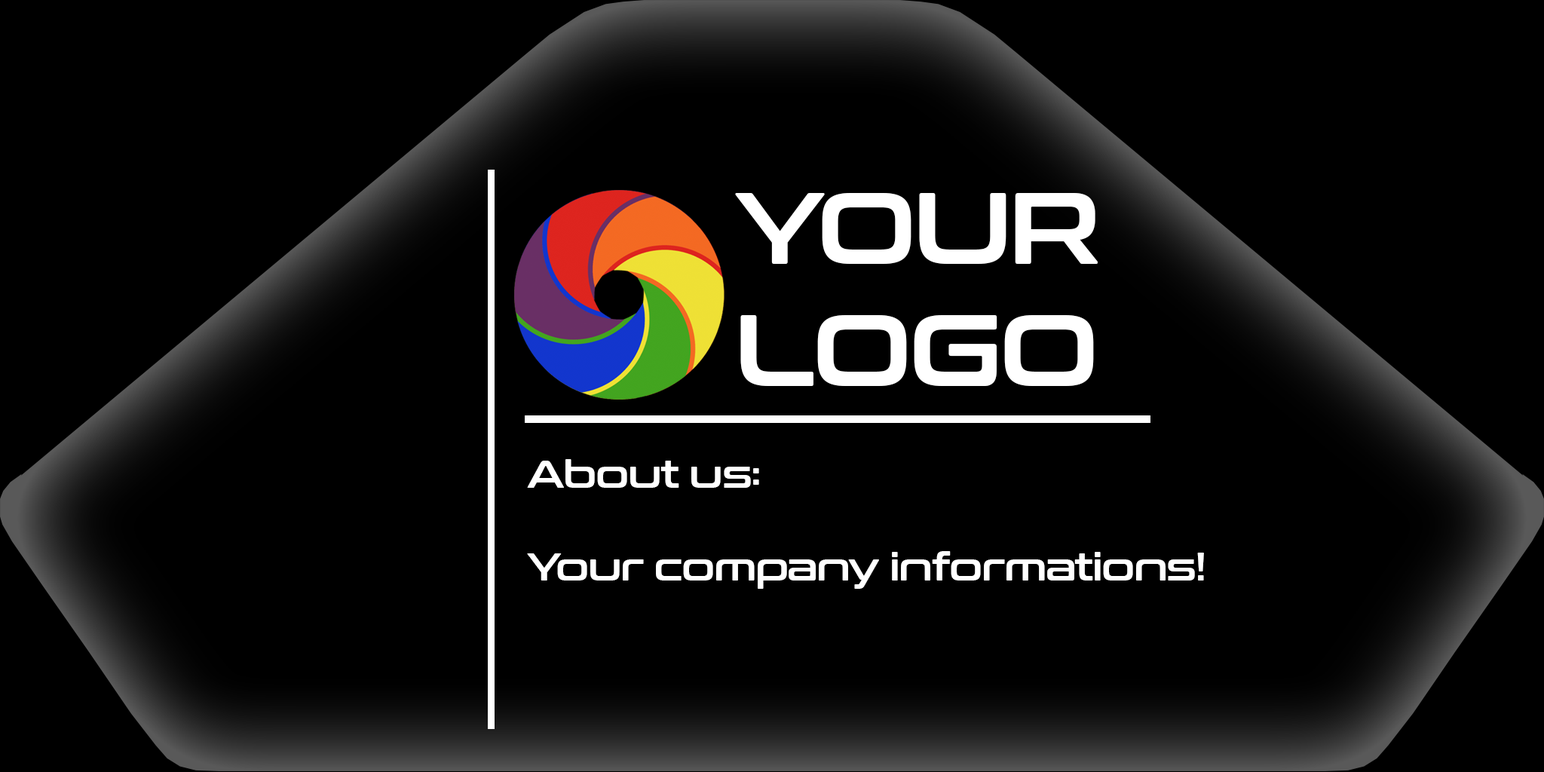
<style>
.page{position:relative;width:1544px;height:772px;background:#000000}
.page>*{position:absolute;margin:0}
.t1{font:101.6px "ConthraxSb-Regular";letter-spacing:-0.035em;color:#ffffff}
.t2{font:38.7px "ConthraxSb-Regular";letter-spacing:-0.035em;color:#ffffff}
</style>
<div class="page">
<p class="t1" style="left:735px;top:193px;width:363px;height:193px">YOUR<br>LOGO</p>
<p class="t2" style="left:527px;top:459px;width:677px;height:130px">About us:<br><br>Your company informations!</p>
</div>
